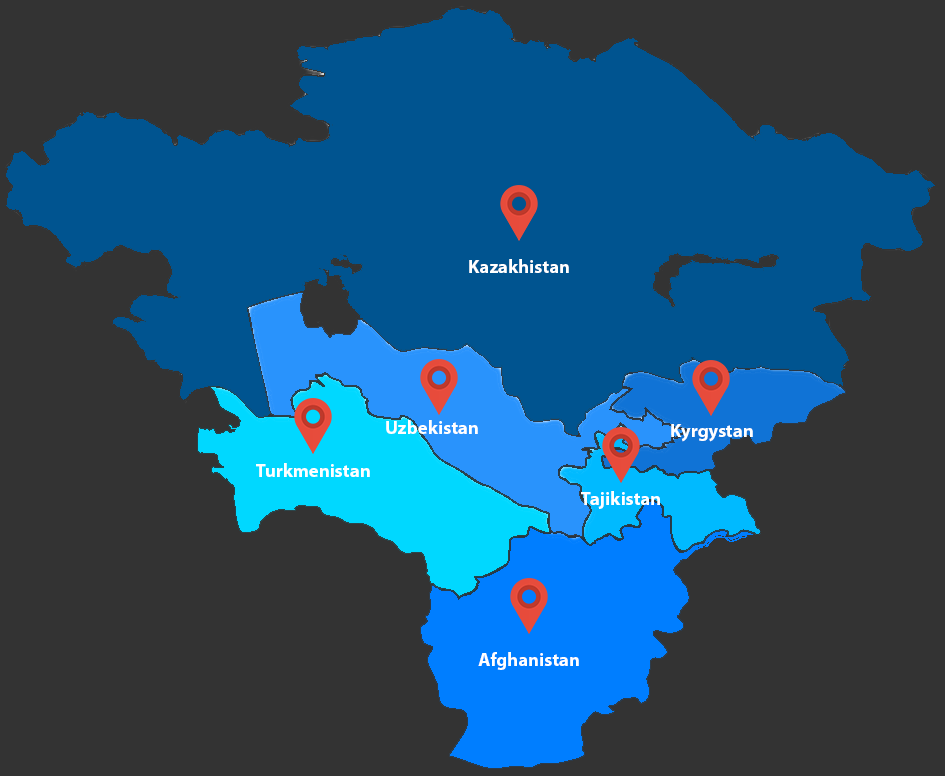
<style>
.page{position:relative;width:945px;height:776px;background:#333333}
.page>*{position:absolute;margin:0}
.t1{font:18.7px "MyriadPro-Bold";color:#ffffff}
</style>
<div class="page">
<p class="t1" style="left:469px;top:259px;width:100px;height:14px">Kazakhistan</p>
<p class="t1" style="left:386px;top:420px;width:92px;height:14px">Uzbekistan</p>
<p class="t1" style="left:671px;top:424px;width:82px;height:18px">Kyrgystan</p>
<p class="t1" style="left:256px;top:463px;width:114px;height:14px">Turkmenistan</p>
<p class="t1" style="left:581px;top:491px;width:79px;height:18px">Tajikistan</p>
<p class="t1" style="left:478px;top:652px;width:101px;height:18px">Afghanistan</p>
</div>
